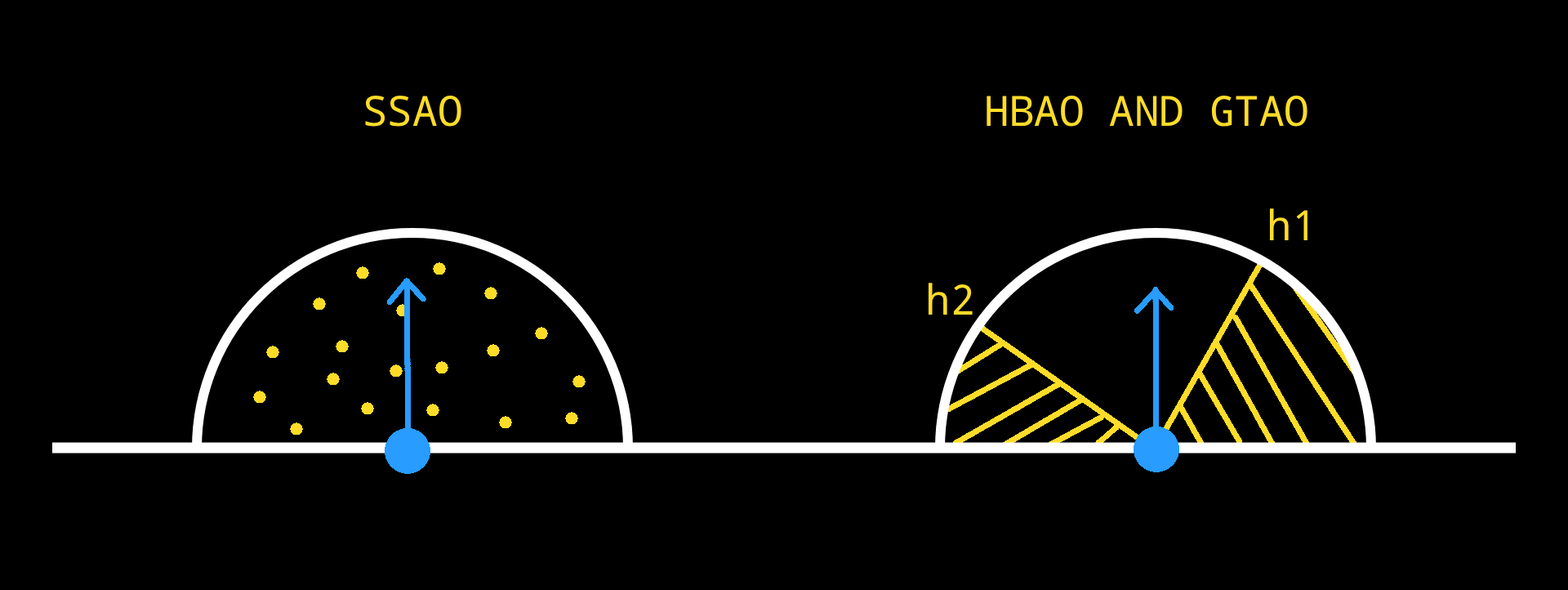
<style>
.page{position:relative;width:1568px;height:590px;background:#000000}
.page>*{position:absolute;margin:0}
.t1{font:41.6px "DroidSansMono";color:#ffdc28}
</style>
<div class="page">
<p class="t1" style="left:365px;top:96px;width:96px;height:31px">SSAO</p>
<p class="t1" style="left:987px;top:96px;width:320px;height:31px">HBAO AND GTAO</p>
<p class="t1" style="left:1269px;top:208px;width:38px;height:32px">h1</p>
<p class="t1" style="left:928px;top:283px;width:45px;height:31px">h2</p>
</div>
